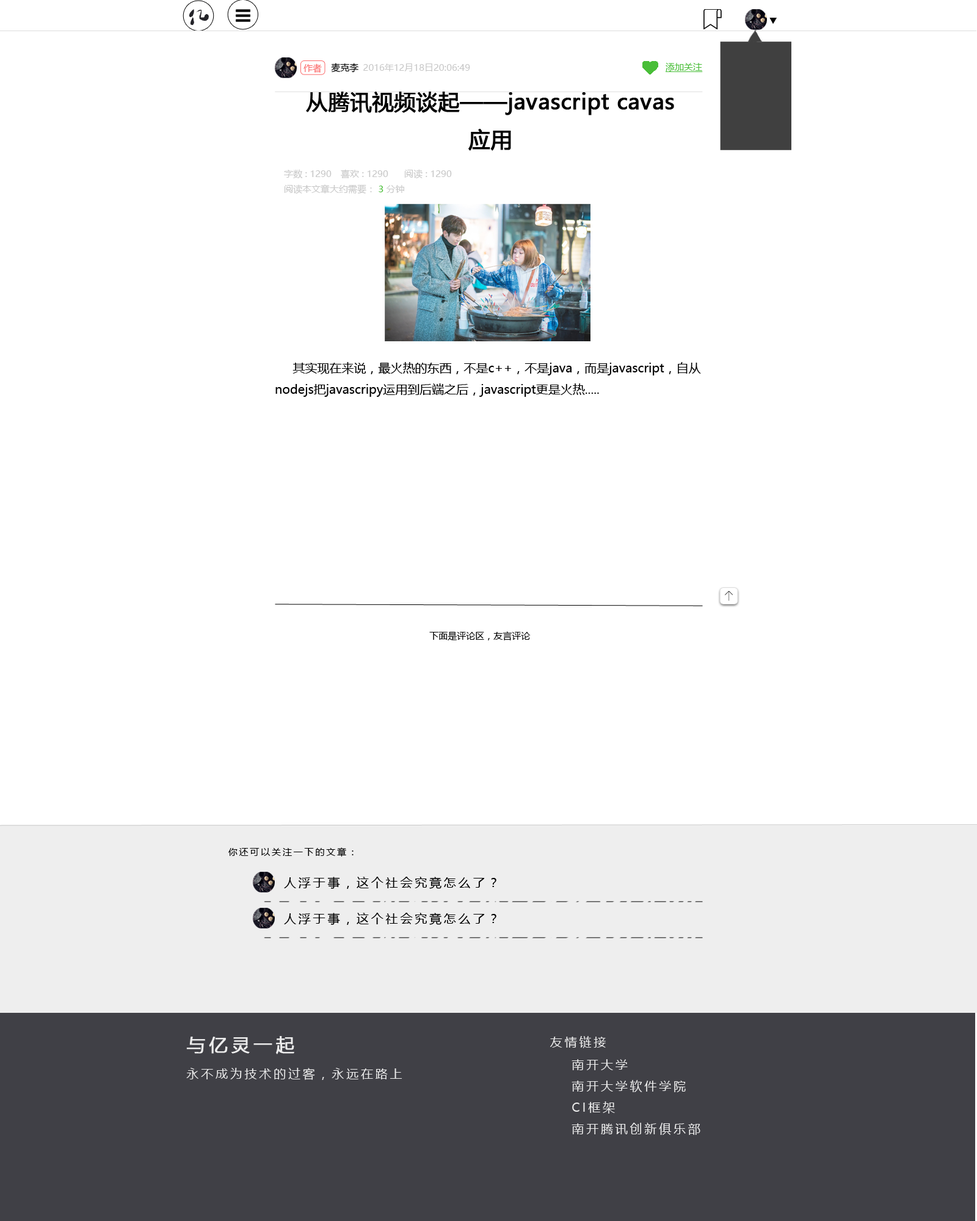
<style>
.page{position:relative;width:977px;height:1221px;background:#ffffff}
.page>*{position:absolute;margin:0}
.t1{font:9.2px "SimSun";color:#000000}
.t2{font:9.2px "MicrosoftYaHei";color:#fb6868}
.t3{font:9.2px "MicrosoftYaHei";color:#000000}
.t4{font:9.2px "MicrosoftYaHei";color:#c8c8c8}
.t5{font:9.2px "MicrosoftYaHei";color:#49be38;text-decoration:underline}
.t6{font:21.4px "MicrosoftYaHei";color:#000000;font-weight:bold}
.t7{font:9.2px "MicrosoftYaHei";color:#49be38}
.t8{font:12.2px "MicrosoftYaHei";color:#000000}
.t9{font:9.2px "MicrosoftYaHei";letter-spacing:0.19em;color:#000000}
.t10{font:12.2px "MicrosoftYaHei";letter-spacing:0.19em;color:#000000}
.t11{font:12.2px "MicrosoftYaHei";letter-spacing:0.19em;color:#ececec}
.t12{font:18.3px "MicrosoftYaHei";letter-spacing:0.19em;color:#ececec;font-weight:bold}
</style>
<div class="page">
<p class="t1" style="left:769px;top:18px;width:7px;height:6px">▼</p>
<p class="t2" style="left:303px;top:63px;width:19px;height:10px">作者</p>
<p class="t3" style="left:331px;top:63px;width:27px;height:10px">麦克李</p>
<p class="t4" style="left:363px;top:63px;width:107px;height:8px">2016年12月18日20:06:49</p>
<p class="t5" style="left:665px;top:62px;width:38px;height:10px">添加关注</p>
<p class="t6" style="left:306px;top:92px;width:368px;height:59px;text-align:center">从腾讯视频谈起——javascript cavas应用</p>
<p class="t4" style="left:284px;top:169px;width:47px;height:10px">字数 : 1290</p>
<p class="t4" style="left:341px;top:169px;width:47px;height:9px">喜欢 : 1290</p>
<p class="t4" style="left:404px;top:169px;width:48px;height:10px">阅读 : 1290</p>
<p class="t4" style="left:284px;top:184px;width:120px;height:10px">阅读本文章大约需要： <span class="t7">3</span> 分钟</p>
<p class="t8" style="left:275px;top:362px;width:426px;height:35px">其实现在来说，最火热的东西，不是c++，不是java，而是javascript，自从nodejs把javascripy运用到后端之后，javascript更是火热.....</p>
<p class="t3" style="left:429px;top:631px;width:101px;height:9px">下面是评论区，友言评论</p>
<p class="t9" style="left:228px;top:847px;width:125px;height:10px">你还可以关注一下的文章：</p>
<p class="t10" style="left:284px;top:877px;width:212px;height:12px">人浮于事，这个社会究竟怎么了？</p>
<p class="t10" style="left:284px;top:913px;width:212px;height:12px">人浮于事，这个社会究竟怎么了？</p>
<p class="t11" style="left:186px;top:1036px;width:216px;height:44px"><span class="t12">与亿灵一起<br></span>永不成为技术的过客，永远在路上</p>
<p class="t11" style="left:549px;top:1036px;width:57px;height:12px">友情链接</p>
<p class="t11" style="left:571px;top:1059px;width:129px;height:76px">南开大学<br>南开大学软件学院<br>CI框架<br>南开腾讯创新俱乐部</p>
</div>
